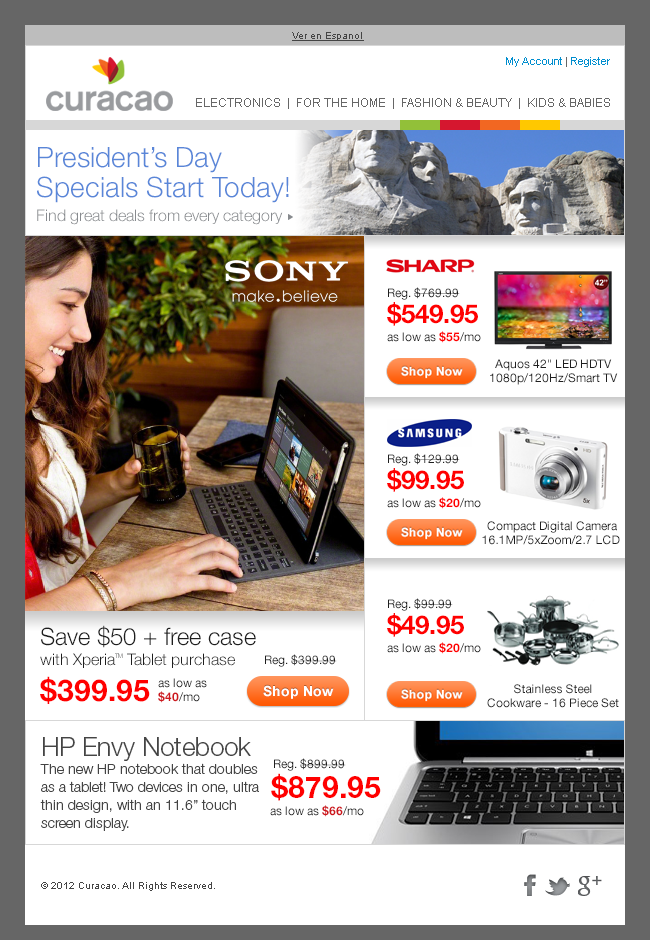
<style>
.page{position:relative;width:650px;height:940px;background:#ffffff}
.page>*{position:absolute;margin:0}
.t1{font:10px "ArialMT";color:#444444;text-decoration:underline}
.t2{font:11px "ArialMT";color:#008ecf}
.t3{font:11px "ArialMT";color:#666666}
.t4{font:12px "ArialMT";color:#666666}
.t5{font:16px/24px "HelveticaNeue-Light";color:#878a8e}
.t6{font:28px/24px "HelveticaNeue-Light";color:#5986d8}
.t7{font:28px/30px "HelveticaNeue-Light";color:#5986d8}
.t8{font:12px/18px "HelveticaNeue-Roman";color:#1e1e1e}
.t9{font:26px/26px "HelveticaNeue-Bold";color:#ff0000}
.t10{font:12px/18px "HelveticaNeue-Bold";color:#ff0000}
.t11{font:12px/14px "HelveticaNeue-Roman";color:#1e1e1e}
.t12{font:16px/20px "HelveticaNeue-Light";color:#1e1e1e}
.t13{font:24px/18px "HelveticaNeue-Light";color:#1e1e1e}
.t14{font:30px/36px "HelveticaNeue-Bold";color:#ff0000}
.t15{font:6px "HelveticaNeue-Light"}
.t16{font:12px "HelveticaNeue-Roman";color:#1e1e1e}
.t17{font:12px/14px "HelveticaNeue-Roman";color:#ce181e}
.t18{font:12px/14px "HelveticaNeue-Bold";color:#ce181e}
.t19{font:14px/18px "HelveticaNeue-Light";color:#444444}
.t20{font:26px/30px "HelveticaNeue-Light";color:#444444}
.t21{font:30px "HelveticaNeue-Bold";color:#ff0000}
.t22{font:12px "HelveticaNeue-Bold";color:#ce181e}
.t23{font:10px "ArialMT";color:#444444}
</style>
<div class="page">
<p class="t1" style="left:292px;top:32px;width:72px;height:9px">Ver en Espanol</p>
<p class="t2" style="left:506px;top:57px;width:104px;height:10px">My Account<span class="t3"> | </span>Register</p>
<p class="t4" style="left:196px;top:98px;width:414px;height:11px">ELECTRONICS  |  FOR THE HOME  |  FASHION &amp; BEAUTY  |  KIDS &amp; BABIES</p>
<p class="t5" style="left:37px;top:147px;width:252px;height:78px"><span class="t6">President’s Day<br></span><span class="t7">Specials Start Today!<br></span>Find great deals from every category</p>
<p class="t8" style="left:387px;top:287px;width:94px;height:56px">Reg. $769.99<br><span class="t9">$549.95<br></span>as low as <span class="t10">$55</span>/mo</p>
<p class="t11" style="left:490px;top:359px;width:128px;height:26px;text-align:center">Aquos 42" LED HDTV<br>1080p/120Hz/Smart TV</p>
<p class="t8" style="left:387px;top:453px;width:94px;height:56px">Reg. $129.99<br><span class="t9">$99.95<br></span>as low as <span class="t10">$20</span>/mo</p>
<p class="t11" style="left:482px;top:521px;width:138px;height:24px;text-align:center">Compact Digital Camera<br>16.1MP/5xZoom/2.7 LCD</p>
<p class="t8" style="left:387px;top:598px;width:94px;height:56px">Reg. $99.99<br><span class="t9">$49.95<br></span>as low as <span class="t10">$20</span>/mo</p>
<p class="t12" style="left:40px;top:625px;width:216px;height:79px"><span class="t13">Save $50 + free case<br></span>with Xperia   Tablet purchase<br><span class="t14">$399.95</span></p>
<p class="t15" style="left:115px;top:653px;width:8px;height:5px">TM</p>
<p class="t16" style="left:265px;top:654px;width:72px;height:13px">Reg. $399.99</p>
<p class="t17" style="left:158px;top:678px;width:49px;height:25px">as low as<br><span class="t18">$40</span>/mo</p>
<p class="t11" style="left:487px;top:684px;width:132px;height:24px;text-align:center">Stainless Steel<br>Cookware - 16 Piece Set</p>
<p class="t19" style="left:40px;top:737px;width:219px;height:94px"><span class="t20">HP Envy Notebook<br></span>The new HP notebook that doubles as a tablet! Two devices in one, ultra thin design, with an 11.6” touch screen display.</p>
<p class="t16" style="left:274px;top:758px;width:72px;height:13px">Reg. $899.99</p>
<p class="t21" style="left:271px;top:773px;width:110px;height:28px">$879.95</p>
<p class="t16" style="left:270px;top:805px;width:94px;height:12px">as low as <span class="t22">$66</span>/mo</p>
<p class="t23" style="left:41px;top:882px;width:174px;height:9px">© 2012 Curacao. All Rights Reserved.</p>
</div>
